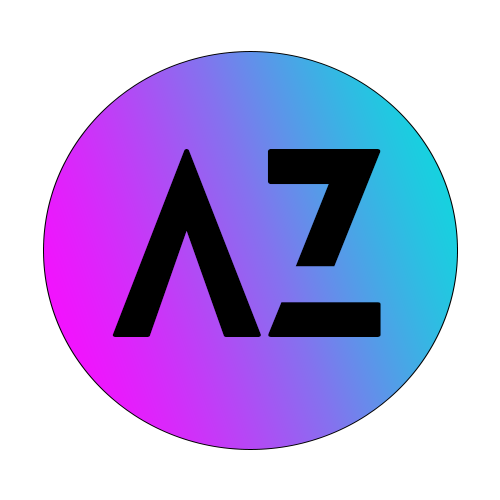
<style>
.page{position:relative;width:500px;height:500px;background:#ffffff}
.page>*{position:absolute;margin:0}
.t1{font:235.2px "Blanka-Regular";color:#000000}
</style>
<div class="page">
<p class="t1" style="left:112px;top:149px;width:269px;height:188px">AZ</p>
</div>
